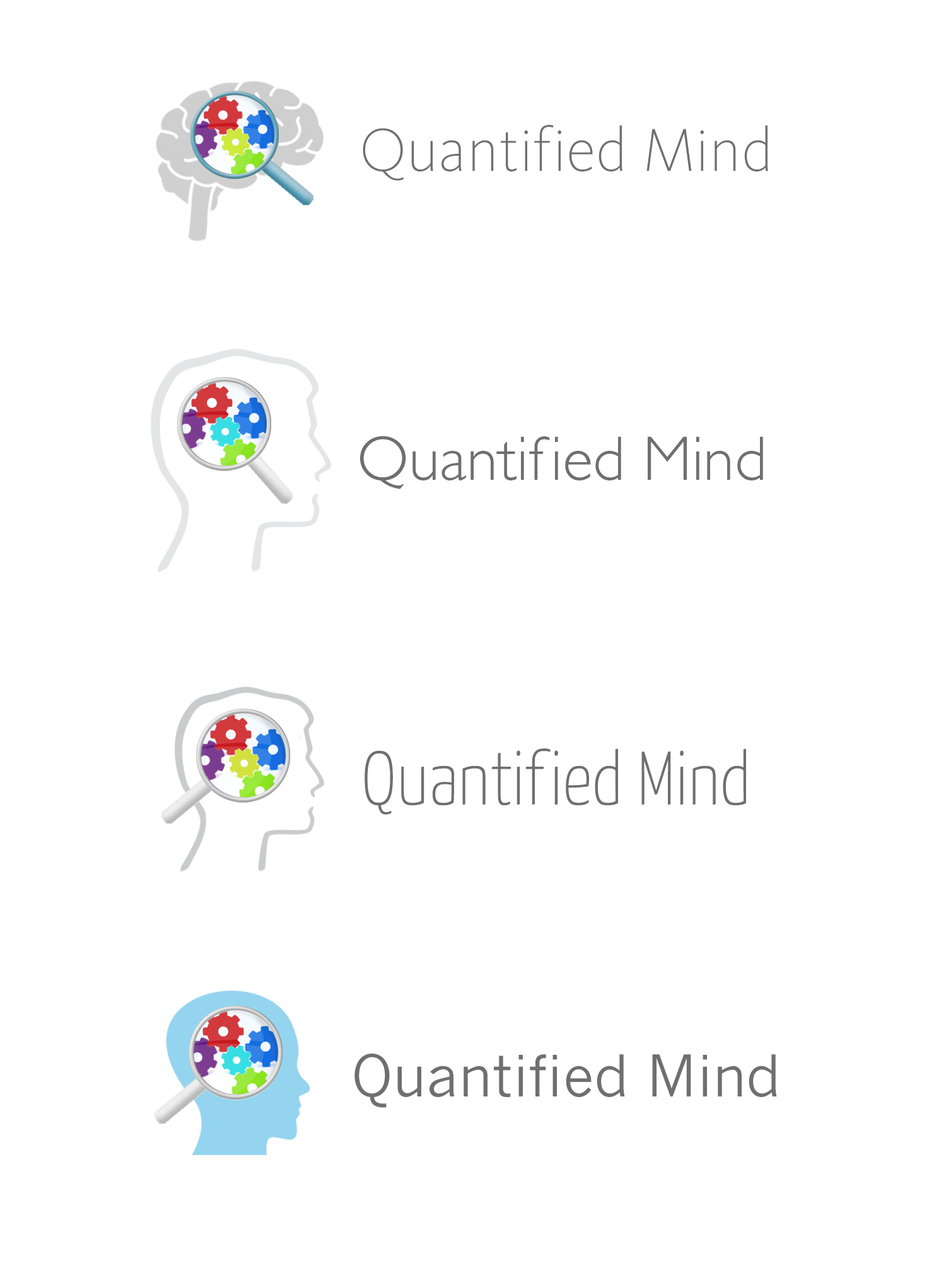
<style>
.page{position:relative;width:946px;height:1261px;background:#ffffff}
.page>*{position:absolute;margin:0}
.t1{font:63px "KievitOT-ExtraLight";color:#6f6f6f}
.t2{font:63px "GillSans-Light";color:#6f6f6f}
.t3{font:75.7px "YanoneKaffeesatz-Thin";color:#6f6f6f}
.t4{font:56.7px "NewsGothicMT";color:#6f6f6f}
</style>
<div class="page">
<p class="t1" style="left:363px;top:125px;width:405px;height:56px">Quantif ied Mind</p>
<p class="t2" style="left:360px;top:436px;width:403px;height:53px">Quantif ied Mind</p>
<p class="t3" style="left:364px;top:748px;width:382px;height:67px">Quantif ied Mind</p>
<p class="t4" style="left:354px;top:1053px;width:423px;height:55px">Quantified Mind</p>
</div>
